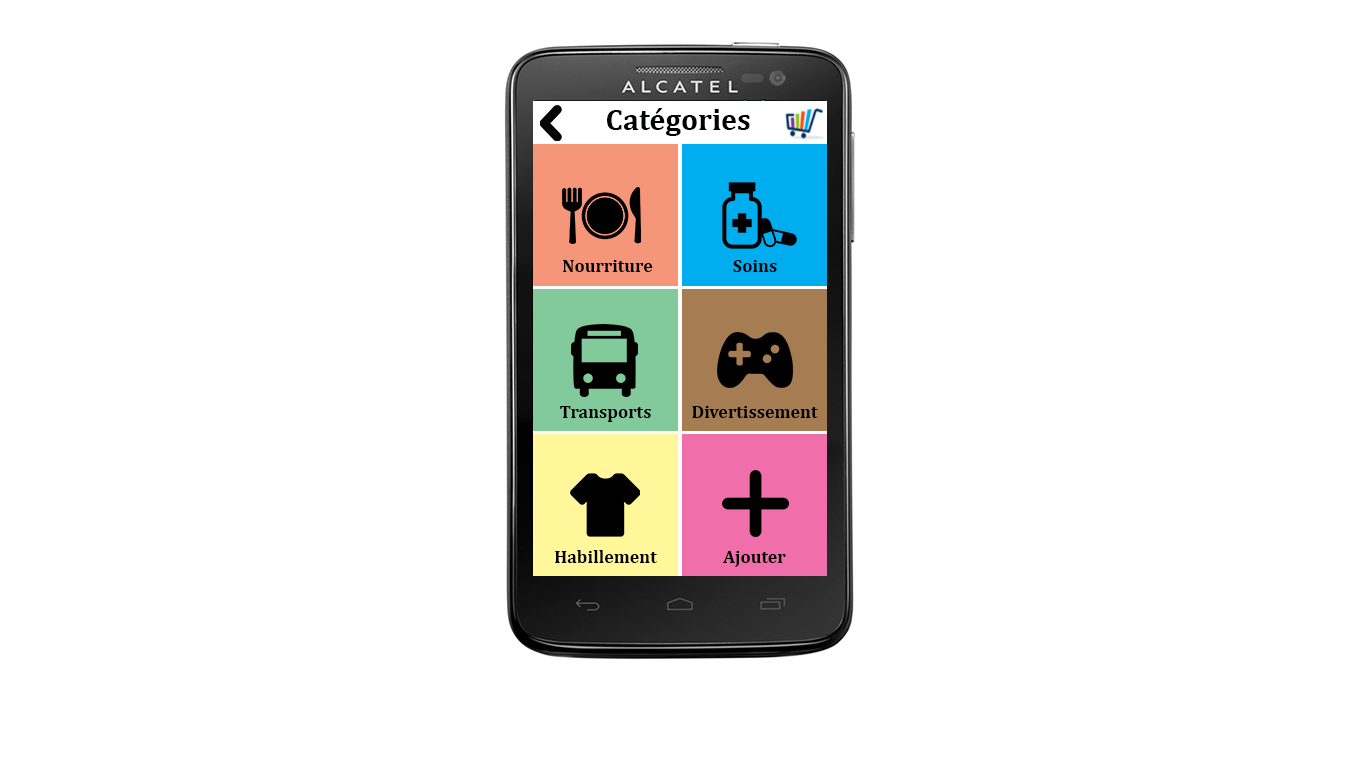
<style>
.page{position:relative;width:1366px;height:768px;background:#ffffff}
.page>*{position:absolute;margin:0}
.t1{font:30px "Cambria-Bold";color:#000101}
.t2{font:18px "Cambria-Bold";color:#000000}
</style>
<div class="page">
<p class="t1" style="left:607px;top:108px;width:143px;height:28px">Catégories</p>
<p class="t2" style="left:563px;top:260px;width:90px;height:12px">Nourriture</p>
<p class="t2" style="left:733px;top:260px;width:44px;height:12px">Soins</p>
<p class="t2" style="left:560px;top:406px;width:91px;height:16px">Transports</p>
<p class="t2" style="left:692px;top:406px;width:126px;height:12px">Divertissement</p>
<p class="t2" style="left:555px;top:550px;width:102px;height:13px">Habillement</p>
<p class="t2" style="left:723px;top:551px;width:63px;height:16px">Ajouter</p>
</div>
